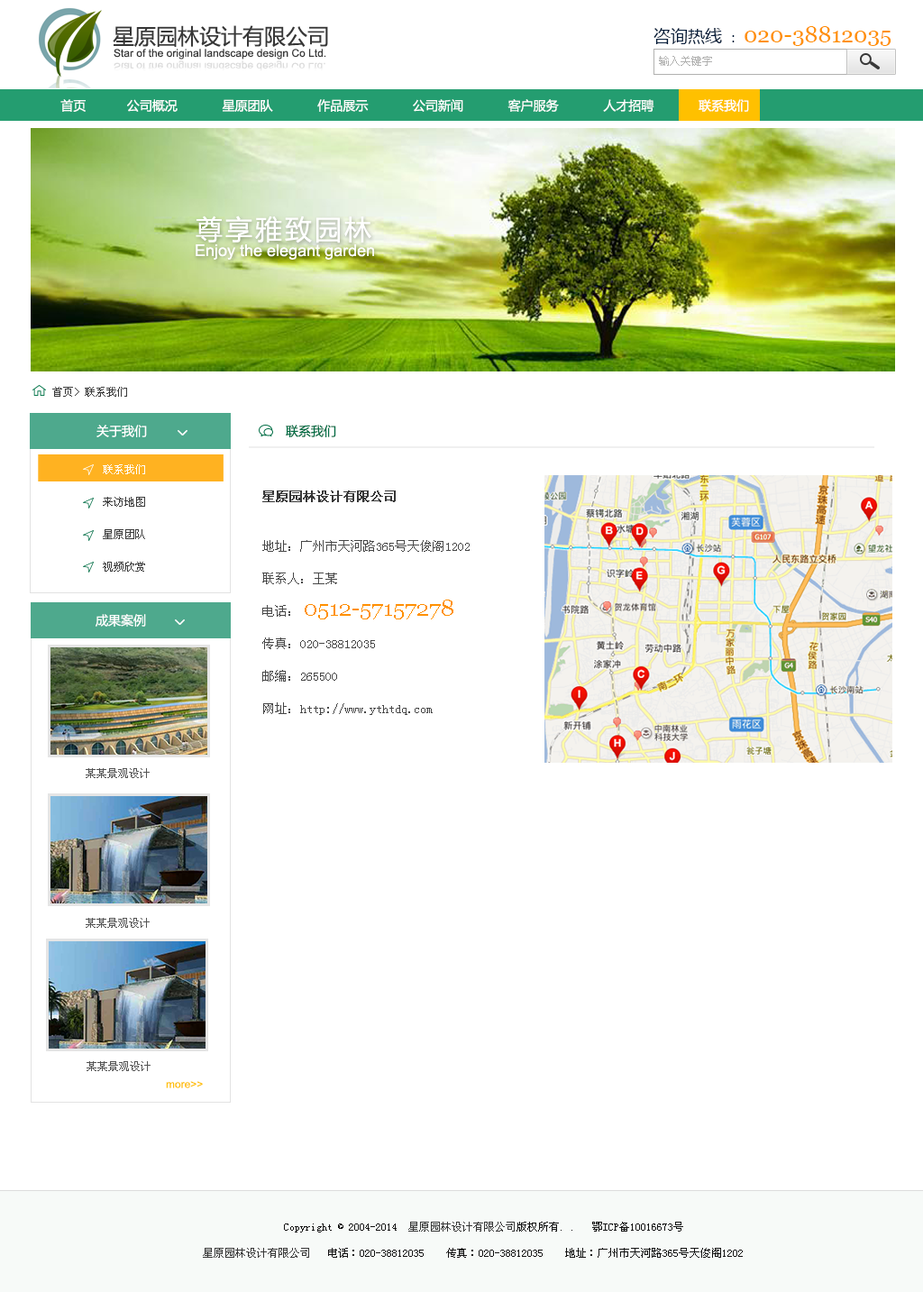
<style>
.page{position:relative;width:923px;height:1292px;background:#ffffff}
.page>*{position:absolute;margin:0}
.t1{font:21.6px "MicrosoftYaHei";color:#373737}
.t2{font:22.5px "Georgia";color:#ff9000}
.t3{font:17.1px "MicrosoftYaHei";color:#001937}
.t4{font:12.6px "MicrosoftYaHei";color:#001937}
.t5{font:10.8px "ArialMT";color:#373737}
.t6{font:10.7px "ArialMT";color:#dcdcdc}
.t7{font:10.8px "SimSun";color:#b1b1b0}
.t8{font:12.6px "MicrosoftYaHei";color:#ffffff}
.t9{font:27px "MicrosoftYaHei";letter-spacing:0.1em;color:#ffffff}
.t10{font:16.2px "ArialMT";color:#ffffff}
.t11{font:10.8px "SimSun";color:#3a3a3a}
.t12{font:12.6px "MicrosoftYaHei";color:#006d44}
.t13{font:10.8px/32.5px "SimSun";color:#3a3a3a}
.t14{font:10.8px/32.5px "SimSun";color:#ffffff}
.t15{font:12.6px/32.5px "SimSun";color:#474747}
.t16{font:12.6px/16.9px "SimSun";color:#373737;font-weight:bold}
.t17{font:22.5px/32.5px "Georgia";color:#ff9000}
.t18{font:10.8px "SimSun";color:#545454}
.t19{font:10.8px "ArialMT";color:#ffc000}
.t20{font:10.8px "SimSun";color:#131313}
.t21{font:10.8px "SimSun";color:#373737}
</style>
<div class="page">
<p class="t1" style="left:113px;top:25px;width:215px;height:22px">星原园林设计有限公司</p>
<p class="t2" style="left:654px;top:26px;width:238px;height:20px"><span class="t3">咨询热线 </span><span class="t4">： </span>020-38812035</p>
<p class="t5" style="left:114px;top:49px;width:212px;height:10px">Star of the original landscape design Co Ltd.</p>
<p class="t6" style="left:114px;top:60px;width:211px;height:11px">Star of the original landscape design Co Ltd.</p>
<p class="t7" style="left:659px;top:56px;width:53px;height:10px">输入关键字</p>
<p class="t8" style="left:60px;top:99px;width:689px;height:13px">首页           公司概况            星原团队            作品展示            公司新闻            客户服务            人才招聘            联系我们</p>
<p class="t9" style="left:196px;top:215px;width:175px;height:28px">尊享雅致园林</p>
<p class="t10" style="left:196px;top:244px;width:178px;height:16px">Enjoy the elegant garden</p>
<p class="t11" style="left:52px;top:387px;width:75px;height:10px">首页&gt; 联系我们</p>
<p class="t8" style="left:96px;top:425px;width:51px;height:12px">关于我们</p>
<p class="t12" style="left:286px;top:425px;width:50px;height:12px">联系我们</p>
<p class="t13" style="left:103px;top:464px;width:42px;height:108px;text-align:justify"><span class="t14">联系我们<br></span>来访地图<br>星原团队<br>视频欣赏</p>
<p class="t15" style="left:262px;top:490px;width:208px;height:225px;text-align:justify"><span class="t16">星原园林设计有限公司<br><br></span>地址：广州市天河路365号天俊阁1202<br>联系人：王某  <br>电话： <span class="t17">0512-57157278    <br></span>传真：020-38812035     <br>邮编：265500<br>网址：http://www.ythtdq.com</p>
<p class="t8" style="left:96px;top:614px;width:50px;height:13px">成果案例</p>
<p class="t18" style="left:86px;top:768px;width:64px;height:10px">某某景观设计</p>
<p class="t18" style="left:86px;top:918px;width:64px;height:10px">某某景观设计</p>
<p class="t18" style="left:87px;top:1061px;width:64px;height:10px">某某景观设计</p>
<p class="t19" style="left:166px;top:1081px;width:37px;height:7px">more&gt;&gt;</p>
<p class="t20" style="left:284px;top:1221px;width:399px;height:11px">Copyright © 2004-2014  <span class="t21">星原园林设计有限公司</span>版权所有. .   鄂ICP备10016673号</p>
<p class="t20" style="left:203px;top:1248px;width:540px;height:10px"><span class="t21">星原园林设计有限公司</span>   电话：020-38812035    传真：020-38812035    地址：广州市天河路365号天俊阁1202</p>
</div>
